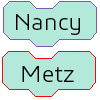
<style>
.page{position:relative;width:100px;height:100px;background:#b2e9da}
.page>*{position:absolute;margin:0}
.t1{font:24px "3ds-Light";color:#000000}
</style>
<div class="page">
<p class="t1" style="left:16px;top:14px;width:64px;height:21px">Nancy</p>
<p class="t1" style="left:22px;top:66px;width:52px;height:16px">Metz</p>
</div>
